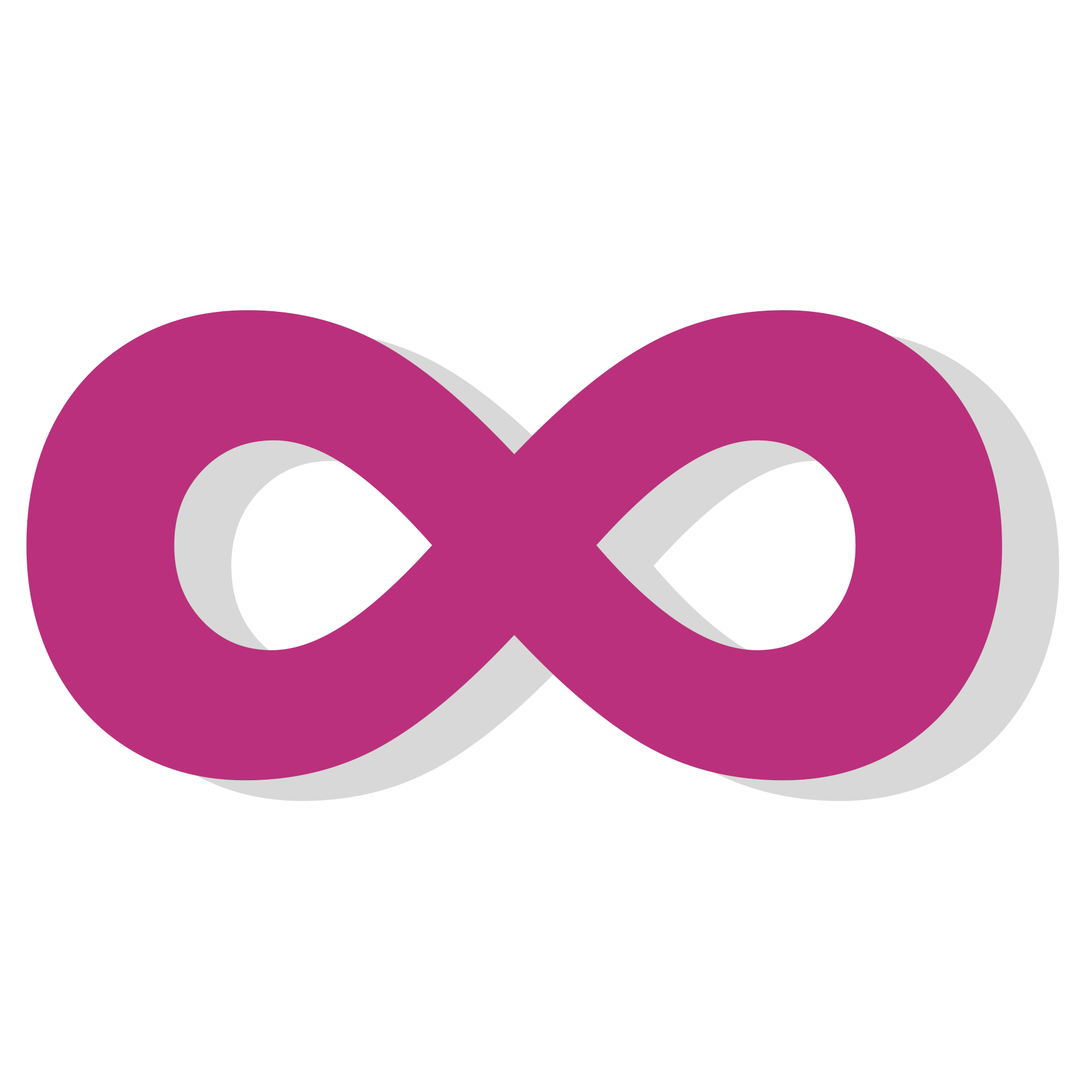
<style>
.page{position:relative;width:1092px;height:1092px;background:#ffffff}
.page>*{position:absolute;margin:0}
.t1{font:1263.9px "MiSans-Medium";color:#ba307c}
</style>
<div class="page">
<p class="t1" style="left:26px;top:310px;width:976px;height:471px">∞</p>
</div>
